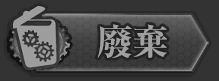
<style>
.page{position:relative;width:219px;height:81px;background:#333333}
.page>*{position:absolute;margin:0}
.t1{font:36px "RyuminPro-ExBold";color:#a1a1a1}
</style>
<div class="page">
<p class="t1" style="left:97px;top:24px;width:70px;height:34px">廢棄</p>
</div>
